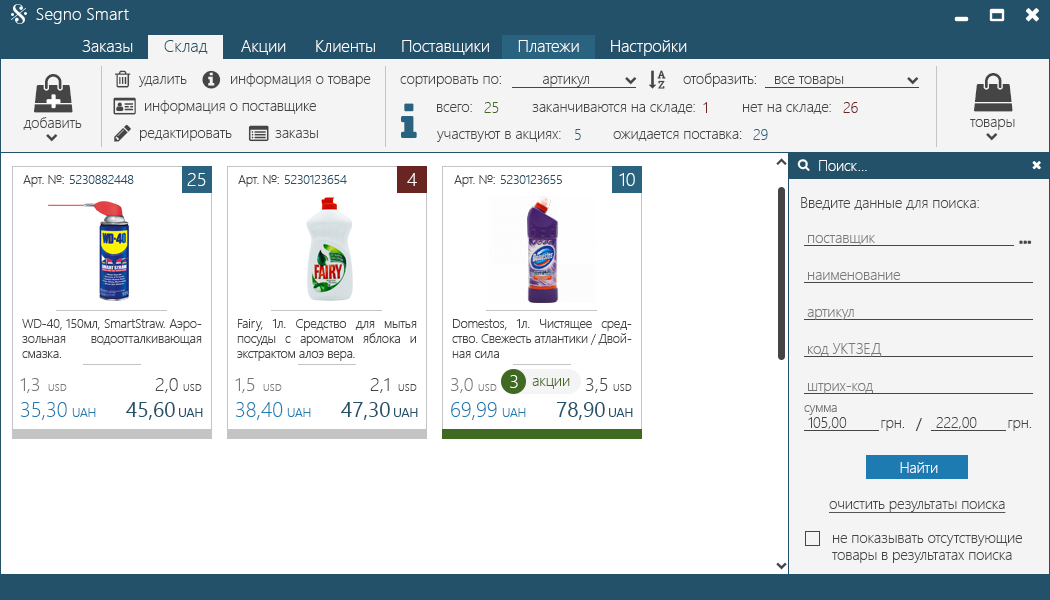
<style>
.page{position:relative;width:1050px;height:600px;background:#ffffff}
.page>*{position:absolute;margin:0}
.t1{font:17.2px "SegoeUI-Light";color:#ffffff}
.t2{font:16.7px "SegoeUI-Light";color:#ffffff}
.t3{font:16.7px "SegoeUI-Light";color:#225169}
.t4{font:14.6px "SegoeUI-Light";color:#454545}
.t5{font:14.6px "SegoeUI-Light";color:#406922}
.t6{font:14.6px "SegoeUI-Light";color:#692522}
.t7{font:14.6px "SegoeUI-Light";color:#2a6380}
.t8{font:14.6px "SegoeUI-Light";color:#ffffff}
.t9{font:18.8px "SegoeUI-Light";color:#ffffff}
.t10{font:12.5px "SegoeUI-Light";color:#454545}
.t11{font:12.5px "SegoeUI-Light";color:#225169}
.t12{font:14.6px "SegoeUI-Light";color:#787878}
.t13{font:18.8px "SegoeUI-Light";color:#787878}
.t14{font:10.4px "SegoeUI-Light";color:#787878}
.t15{font:18.8px "SegoeUI-Light";color:#454545}
.t16{font:10.4px "SegoeUI-Light";color:#454545}
.t17{font:20.8px "SegoeUI-Light";color:#1e7bb1}
.t18{font:12.5px "SegoeUI-Light";color:#1e7bb1}
.t19{font:20.8px "SegoeUI";color:#225169}
.t20{font:12.5px "SegoeUI";color:#225169}
.t21{font:12.5px "SegoeUI-Light";color:#787878}
.t22{font:14.6px "SegoeUI";color:#454545}
.t23{font:14.6px "SegoeUI-Light";color:#454545;text-decoration:underline}
</style>
<div class="page">
<p class="t1" style="left:36px;top:8px;width:93px;height:16px">Segno Smart</p>
<p class="t2" style="left:82px;top:40px;width:51px;height:12px">Заказы</p>
<p class="t3" style="left:164px;top:40px;width:44px;height:14px">Склад</p>
<p class="t2" style="left:241px;top:40px;width:45px;height:15px">Акции</p>
<p class="t2" style="left:316px;top:40px;width:59px;height:12px">Клиенты</p>
<p class="t2" style="left:402px;top:40px;width:87px;height:15px">Поставщики</p>
<p class="t2" style="left:518px;top:40px;width:61px;height:12px">Платежи</p>
<p class="t2" style="left:611px;top:40px;width:76px;height:16px">Настройки</p>
<p class="t4" style="left:139px;top:76px;width:48px;height:11px">удалить</p>
<p class="t4" style="left:231px;top:73px;width:140px;height:14px">информация о товаре</p>
<p class="t4" style="left:400px;top:76px;width:101px;height:11px">сортировать по:</p>
<p class="t4" style="left:543px;top:76px;width:46px;height:11px">артикул</p>
<p class="t4" style="left:683px;top:73px;width:73px;height:14px">отобразить:</p>
<p class="t4" style="left:775px;top:76px;width:69px;height:11px">все товары</p>
<p class="t4" style="left:145px;top:100px;width:172px;height:14px">информация о поставщике</p>
<p class="t5" style="left:484px;top:102px;width:15px;height:11px">25</p>
<p class="t6" style="left:703px;top:102px;width:4px;height:11px">1</p>
<p class="t6" style="left:843px;top:102px;width:15px;height:11px">26</p>
<p class="t4" style="left:437px;top:104px;width:35px;height:8px">всего:</p>
<p class="t4" style="left:532px;top:104px;width:163px;height:10px">заканчиваются на складе:</p>
<p class="t4" style="left:743px;top:104px;width:88px;height:10px">нет на складе:</p>
<p class="t4" style="left:23px;top:117px;width:59px;height:13px">добавить</p>
<p class="t4" style="left:970px;top:119px;width:45px;height:11px">товары</p>
<p class="t4" style="left:140px;top:130px;width:92px;height:11px">редактировать</p>
<p class="t4" style="left:275px;top:130px;width:43px;height:8px">заказы</p>
<p class="t4" style="left:437px;top:131px;width:124px;height:11px">участвуют в акциях:</p>
<p class="t7" style="left:575px;top:129px;width:6px;height:11px">5</p>
<p class="t4" style="left:613px;top:131px;width:129px;height:10px">ожидается поставка:</p>
<p class="t7" style="left:753px;top:129px;width:15px;height:11px">29</p>
<p class="t8" style="left:819px;top:160px;width:48px;height:11px">Поиск...</p>
<p class="t9" style="left:187px;top:173px;width:19px;height:13px">25</p>
<p class="t9" style="left:407px;top:173px;width:10px;height:13px">4</p>
<p class="t9" style="left:619px;top:173px;width:16px;height:13px">10</p>
<p class="t10" style="left:23px;top:175px;width:41px;height:12px">Арт. №:</p>
<p class="t11" style="left:69px;top:175px;width:65px;height:9px">5230882448</p>
<p class="t10" style="left:238px;top:175px;width:41px;height:12px">Арт. №:</p>
<p class="t11" style="left:284px;top:175px;width:63px;height:9px">5230123654</p>
<p class="t10" style="left:454px;top:175px;width:41px;height:12px">Арт. №:</p>
<p class="t11" style="left:500px;top:175px;width:62px;height:9px">5230123655</p>
<p class="t4" style="left:801px;top:197px;width:178px;height:13px">Введите данные для поиска:</p>
<p class="t12" style="left:808px;top:235px;width:67px;height:11px">поставщик</p>
<p class="t12" style="left:808px;top:272px;width:93px;height:8px">наименование</p>
<p class="t12" style="left:807px;top:309px;width:47px;height:11px">артикул</p>
<p class="t10" style="left:22px;top:319px;width:180px;height:39px;text-align:justify">WD-40, 150мл, SmartStraw. Аэрозольная водоотталкивающая смазка.</p>
<p class="t10" style="left:237px;top:319px;width:180px;height:42px;text-align:justify">Fairy, 1л. Средство для мытья посуды с ароматом яблока и экстрактом алоэ вера.</p>
<p class="t10" style="left:452px;top:319px;width:180px;height:39px;text-align:justify">Domestos, 1л. Чистящее средство. Свежесть атлантики / Двойная сила</p>
<p class="t12" style="left:808px;top:343px;width:74px;height:14px">код УКТЗЕД</p>
<p class="t9" style="left:510px;top:375px;width:8px;height:13px">3</p>
<p class="t13" style="left:20px;top:378px;width:20px;height:15px">1,3</p>
<p class="t14" style="left:48px;top:384px;width:19px;height:7px">USD</p>
<p class="t15" style="left:155px;top:378px;width:23px;height:15px">2,0</p>
<p class="t16" style="left:183px;top:384px;width:19px;height:7px">USD</p>
<p class="t13" style="left:235px;top:378px;width:20px;height:15px">1,5</p>
<p class="t14" style="left:263px;top:384px;width:19px;height:7px">USD</p>
<p class="t15" style="left:370px;top:378px;width:19px;height:15px">2,1</p>
<p class="t16" style="left:398px;top:384px;width:19px;height:7px">USD</p>
<p class="t13" style="left:450px;top:378px;width:23px;height:15px">3,0</p>
<p class="t14" style="left:478px;top:384px;width:19px;height:7px">USD</p>
<p class="t5" style="left:532px;top:378px;width:38px;height:11px">акции</p>
<p class="t15" style="left:585px;top:378px;width:23px;height:15px">3,5</p>
<p class="t16" style="left:613px;top:384px;width:19px;height:7px">USD</p>
<p class="t12" style="left:808px;top:383px;width:65px;height:11px">штрих-код</p>
<p class="t17" style="left:21px;top:402px;width:46px;height:18px">35,30</p>
<p class="t18" style="left:72px;top:408px;width:24px;height:9px">UAH</p>
<p class="t19" style="left:126px;top:402px;width:49px;height:18px">45,60</p>
<p class="t20" style="left:179px;top:408px;width:24px;height:9px">UAH</p>
<p class="t17" style="left:236px;top:402px;width:47px;height:18px">38,40</p>
<p class="t18" style="left:287px;top:408px;width:24px;height:9px">UAH</p>
<p class="t19" style="left:341px;top:402px;width:49px;height:18px">47,30</p>
<p class="t20" style="left:394px;top:408px;width:24px;height:9px">UAH</p>
<p class="t17" style="left:451px;top:402px;width:46px;height:18px">69,99</p>
<p class="t18" style="left:502px;top:408px;width:24px;height:9px">UAH</p>
<p class="t19" style="left:556px;top:402px;width:49px;height:18px">78,90</p>
<p class="t20" style="left:609px;top:408px;width:24px;height:9px">UAH</p>
<p class="t21" style="left:804px;top:405px;width:33px;height:10px">сумма</p>
<p class="t4" style="left:808px;top:417px;width:39px;height:12px">105,00</p>
<p class="t4" style="left:881px;top:420px;width:23px;height:11px">грн.</p>
<p class="t22" style="left:915px;top:418px;width:7px;height:13px">/</p>
<p class="t4" style="left:936px;top:417px;width:41px;height:12px">222,00</p>
<p class="t4" style="left:1008px;top:420px;width:23px;height:11px">грн.</p>
<p class="t8" style="left:900px;top:462px;width:38px;height:11px">Найти</p>
<p class="t23" style="left:829px;top:501px;width:177px;height:12px">очистить результаты поиска</p>
<p class="t4" style="left:832px;top:535px;width:191px;height:28px">не показывать отсутствующие <br>товары в результатах поиска</p>
</div>
